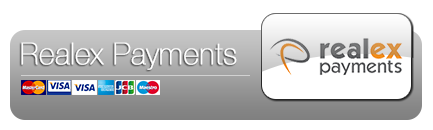
<style>
.page{position:relative;width:433px;height:130px;background:#ffffff}
.page>*{position:absolute;margin:0}
.t1{font:30px "HelveticaNeue-UltraLight";color:#ffffff;font-weight:bold}
</style>
<div class="page">
<p class="t1" style="left:21px;top:42px;width:216px;height:28px">Realex Payments</p>
</div>
